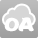
<style>
.page{position:relative;width:38px;height:38px}
.page>*{position:absolute;margin:0}
.t1{font:17.7px "Jpangtouyu";letter-spacing:-0.03em;color:#ffffff;font-weight:bold}
</style>
<div class="page">
<p class="t1" style="left:4px;top:17px;width:30px;height:15px">OA</p>
</div>
